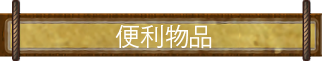
<style>
.page{position:relative;width:322px;height:61px;background:#ffffff}
.page>*{position:absolute;margin:0}
.t1{font:25px "GothicMB101Pr6N-Light";color:#fffffa}
</style>
<div class="page">
<p class="t1" style="left:115px;top:24px;width:97px;height:25px">便利物品</p>
</div>
